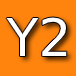
<style>
.page{position:relative;width:76px;height:76px;background:#ff840e}
.page>*{position:absolute;margin:0}
.t1{font:52px "DejaVuSans";color:#ffffff}
</style>
<div class="page">
<p class="t1" style="left:6px;top:17px;width:61px;height:39px">Y2</p>
</div>
